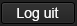
<style>
.page{position:relative;width:77px;height:26px}
.page>*{position:absolute;margin:0}
.t1{font:14px "ArialMT";color:#f8f8f8}
</style>
<div class="page">
<p class="t1" style="left:17px;top:7px;width:42px;height:14px">Log uit</p>
<p class="t1" style="left:17px;top:7px;width:42px;height:14px">Log uit</p>
</div>
